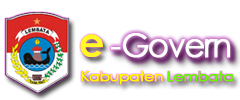
<style>
.page{position:relative;width:240px;height:100px;background:#ffffff}
.page>*{position:absolute;margin:0}
.t1{font:34.1px "CenturyGothic";letter-spacing:-0.06em;color:#ffffff;font-weight:bold;scale:0.93 1}
.t2{font:8.5px "CenturyGothic";letter-spacing:-0.06em;color:#ffffff;font-weight:bold;scale:0.93 1}
.t3{font:13.7px "CenturyGothic";letter-spacing:-0.06em;color:#fcff00;font-weight:bold;scale:1.15 1}
.t4{font:13.7px "CenturyGothic";letter-spacing:-0.06em;color:#66ff00;font-weight:bold;scale:1.15 1}
</style>
<div class="page">
<p class="t1" style="left:111px;top:33px;width:120px;height:25px"><span class="t2"> </span>- Govern</p>
<p class="t3" style="left:81px;top:71px;width:152px;height:14px">Kabupaten <span class="t4">Lembata</span></p>
</div>
